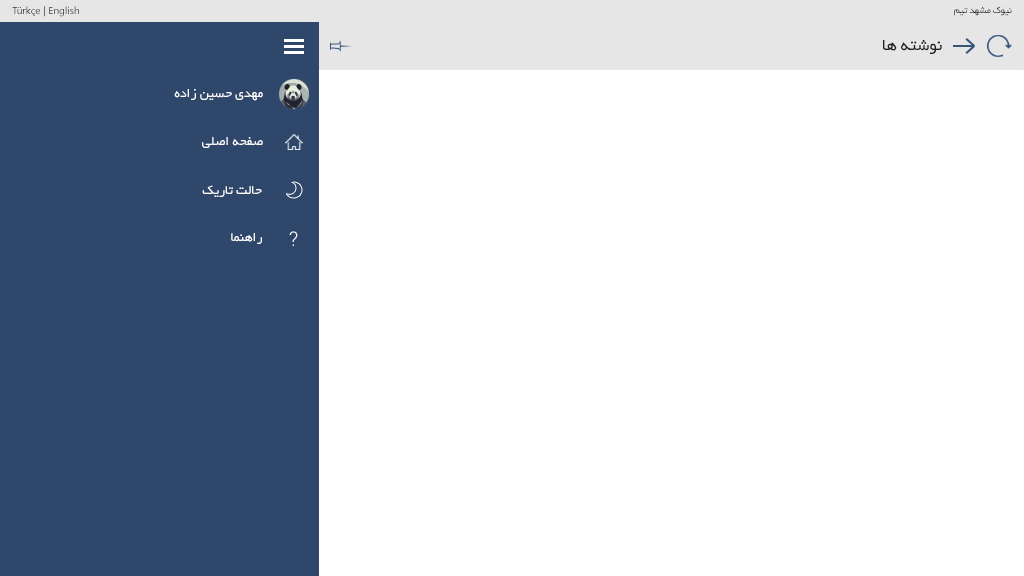
<style>
.page{position:relative;width:1024px;height:576px;background:#ffffff}
.page>*{position:absolute;margin:0}
.t1{font:10px "SegoeUI"}
.t2{font:10px "BYekan";color:#212121}
.t3{font:18px "BYekan";color:#212121}
.t4{font:14px "BYekan";color:#ffffff}
.t5{font:20px "Roboto-Light";color:#ffffff}
</style>
<div class="page">
<p class="t1" style="left:12px;top:6px;width:67px;height:11px">Türkçe | English</p>
<p class="t2" style="left:954px;top:6px;width:58px;height:10px">نیوک مشهد تیم</p>
<p class="t3" style="left:883px;top:40px;width:59px;height:14px">نوشته ها</p>
<p class="t4" style="left:174px;top:89px;width:89px;height:12px">مهدی حسین زاده</p>
<p class="t4" style="left:202px;top:137px;width:61px;height:11px">صفحه اصلی</p>
<p class="t4" style="left:202px;top:185px;width:60px;height:12px">حالت تاریک</p>
<p class="t4" style="left:231px;top:233px;width:31px;height:11px">راهنما</p>
<p class="t5" style="left:289px;top:231px;width:9px;height:15px">?</p>
</div>
